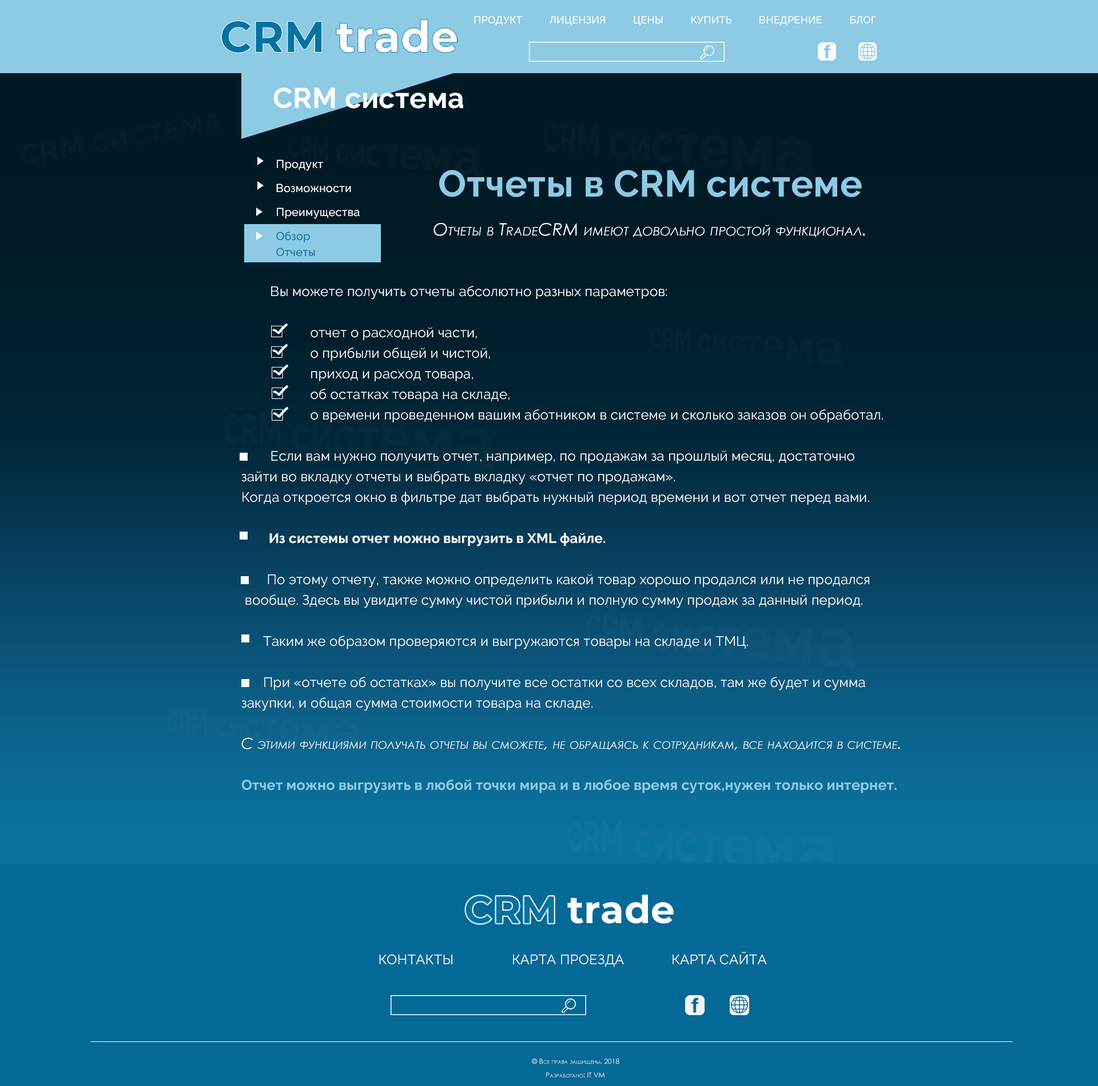
<style>
.page{position:relative;width:1098px;height:1086px}
.page>*{position:absolute;margin:0}
.t1{font:10.3px "Raleway-Medium";letter-spacing:0.01em;color:#ffffff;text-transform:uppercase}
.t2{font:43.4px "Montserrat-Bold";letter-spacing:0.01em;color:#0072a4}
.t3{font:43.4px "Montserrat-Bold";letter-spacing:0.01em;color:#fffefe}
.t4{font:28.6px "Raleway-Bold";letter-spacing:0.01em;color:#fefefe;font-variant:small-caps}
.t5{font:11.4px/8px "Raleway-Medium";letter-spacing:0.01em;color:#ffffff;font-variant:small-caps}
.t6{font:11.4px/8px "Raleway-Medium";letter-spacing:0.01em;color:#0072a4;font-variant:small-caps}
.t7{font:37.2px "Raleway-Bold";letter-spacing:0.01em;color:#8dcae4;font-variant:small-caps}
.t8{font:17.2px "CenturyGothic-Italic";letter-spacing:0.01em;color:#fefefe;font-variant:small-caps}
.t9{font:13.7px/20.6px "Raleway-Regular";letter-spacing:0.01em;color:#fefefe;font-variant:small-caps}
.t10{font:13.7px/20.6px "Raleway-Bold";letter-spacing:0.01em;color:#fefefe;font-variant:small-caps}
.t11{font:14.9px/20.6px "CenturyGothic-Italic";letter-spacing:0.01em;color:#fefefe;font-variant:small-caps}
.t12{font:14.3px/20.6px "Raleway-Bold";letter-spacing:0.01em;color:#8dcae4;font-variant:small-caps}
.t13{font:38.2px "Montserrat-Bold";letter-spacing:0.01em;color:#0072a4}
.t14{font:38.2px "Montserrat-Bold";letter-spacing:0.01em;color:#fffefe}
.t15{font:13.7px "Raleway-Regular";letter-spacing:0.01em;color:#ffffff;text-transform:uppercase}
.t16{font:6.9px/6.9px "CenturyGothic";letter-spacing:0.01em;color:#ffffff;font-variant:small-caps}
</style>
<div class="page">
<p class="t1" style="left:474px;top:16px;width:402px;height:10px">Продукт          Лицензия          Цены          Купить          Внедрение          Блог</p>
<p class="t2" style="left:222px;top:21px;width:100px;height:32px">CRM</p>
<p class="t3" style="left:336px;top:19px;width:121px;height:34px">trade</p>
<p class="t4" style="left:273px;top:87px;width:190px;height:22px">CRM система</p>
<p class="t5" style="left:276px;top:160px;width:84px;height:97px">Продукт<br><br><br>Возможности<br><br><br>Преимущества<br><br><br><span class="t6">Обзор<br><br>Отчеты</span></p>
<p class="t7" style="left:439px;top:170px;width:423px;height:27px">Отчеты в CRM системе</p>
<p class="t8" style="left:433px;top:223px;width:432px;height:14px">Отчеты в TradeCRM имеют довольно простой функционал.</p>
<p class="t9" style="left:241px;top:286px;width:659px;height:508px">Вы можете получить отчеты абсолютно разных параметров:<br><br>                   отчет о расходной части, <br>                   о прибыли общей и чистой, <br>                   приход и расход товара, <br>                   об остатках товара на складе, <br>                   о времени проведенном вашим аботником в системе и сколько заказов он обработал.<br><br>        Если вам нужно получить отчет, например, по продажам за прошлый месяц, достаточно <br>зайти во вкладку отчеты и выбрать вкладку «отчет по продажам». <br>Когда откроется окно в фильтре дат выбрать нужный период времени и вот отчет перед вами. <br><br><span class="t10">        Из системы отчет можно выгрузить в XML файле. <br><br></span>       По этому отчету, также можно определить какой товар хорошо продался или не продался<br> вообще. Здесь вы увидите сумму чистой прибыли и полную сумму продаж за данный период.<br><br>      Таким же образом проверяются и выгружаются товары на складе и ТМЦ. <br><br>      При «отчете об остатках» вы получите все остатки со всех складов, там же будет и сумма <br>закупки, и общая сумма стоимости товара на складе.<br><br><span class="t11">С этими функциями получать отчеты вы сможете, не обращаясь к сотрудникам, все находится в системе. <br><br></span><span class="t12">Отчет можно выгрузить в любой точки мира и в любое время суток,нужен только интернет.</span></p>
<p class="t13" style="left:465px;top:896px;width:89px;height:28px">CRM</p>
<p class="t14" style="left:567px;top:895px;width:106px;height:29px">trade</p>
<p class="t15" style="left:379px;top:952px;width:388px;height:15px">контакты                Карта проезда             Карта сайта</p>
<p class="t16" style="left:532px;top:1059px;width:87px;height:19px">© Все права защищены. 2018<br><br>       Разработано: IT VM</p>
</div>
